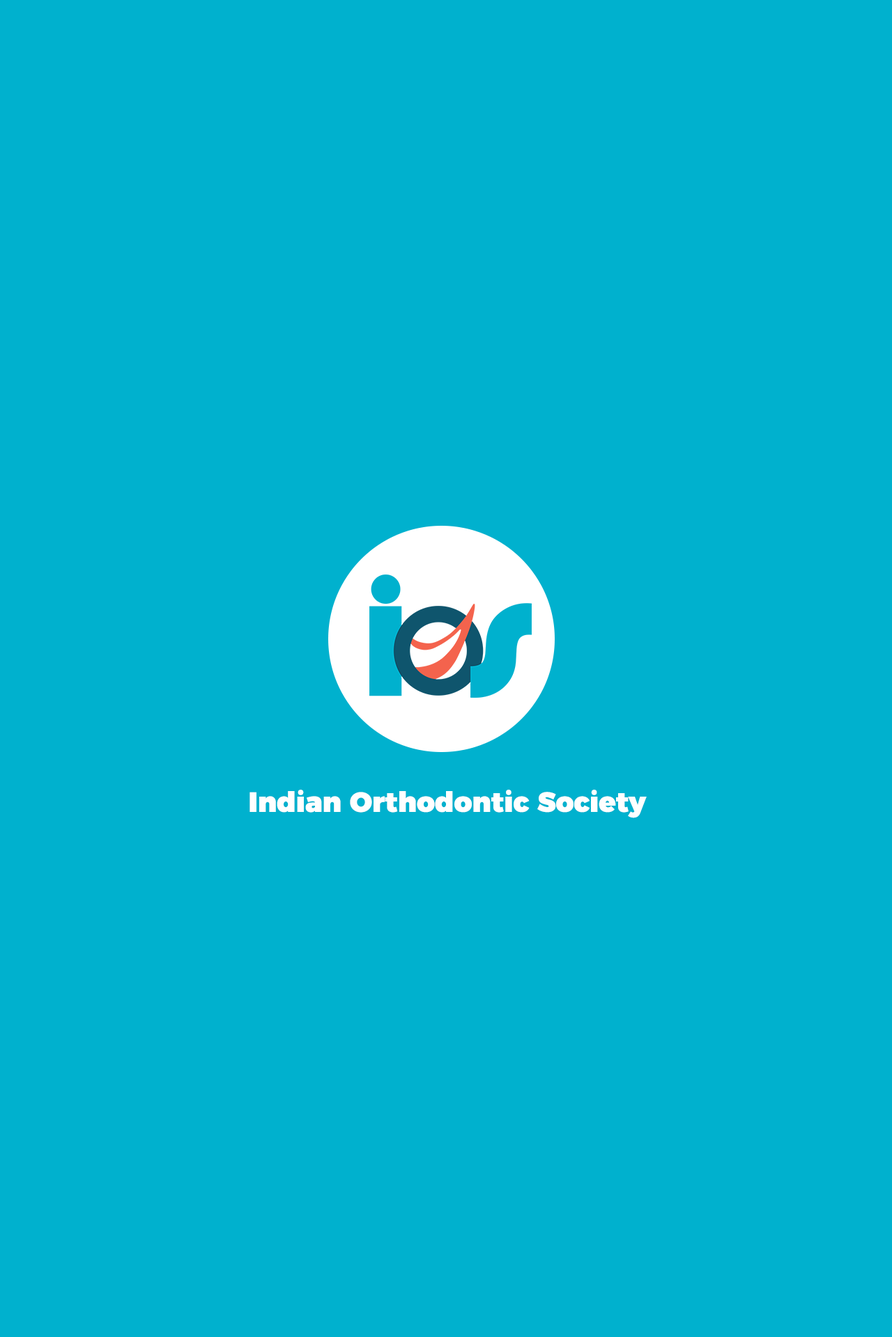
<style>
.page{position:relative;width:892px;height:1337px;background:#00b1ce}
.page>*{position:absolute;margin:0}
.t1{font:27.9px "Montserrat-Black";color:#ffffff}
</style>
<div class="page">
<p class="t1" style="left:249px;top:790px;width:397px;height:28px">Indian Orthodontic Society</p>
</div>
